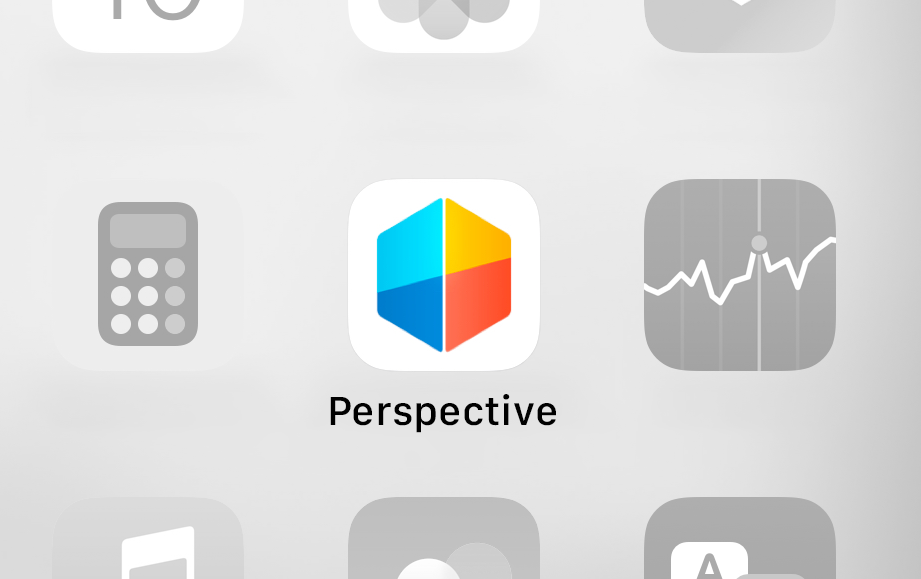
<style>
.page{position:relative;width:921px;height:579px}
.page>*{position:absolute;margin:0}
.t1{font:42px "SFCompact-Medium";color:#000000}
</style>
<div class="page">
<p class="t1" style="left:330px;top:394px;width:226px;height:39px">Perspective</p>
</div>
